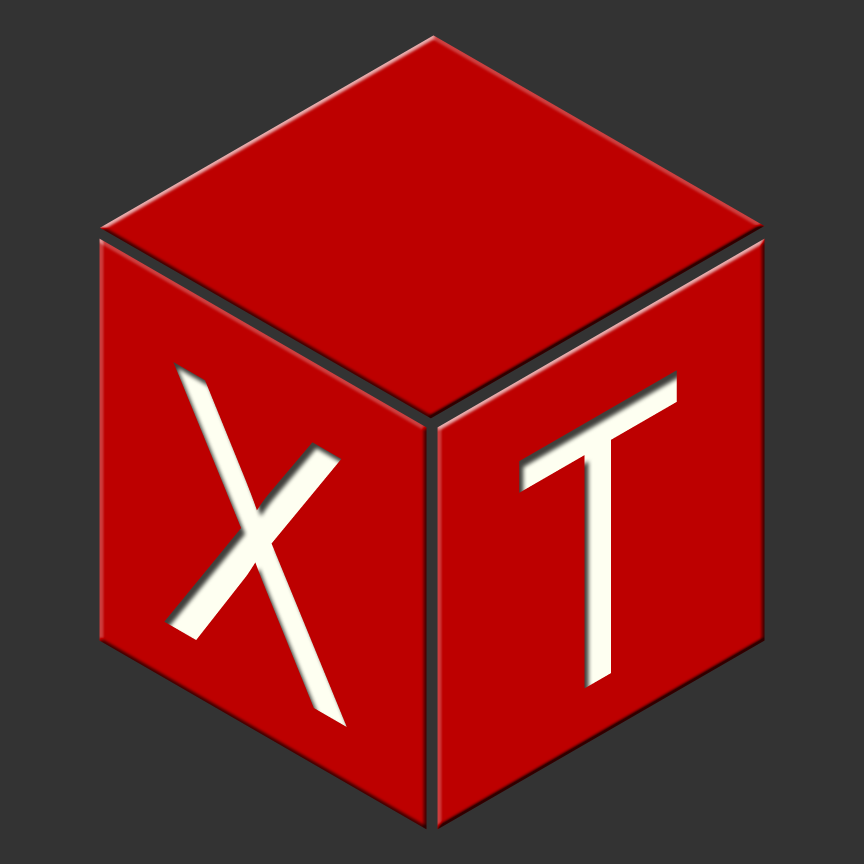
<style>
.page{position:relative;width:864px;height:864px;background:#333333}
.page>*{position:absolute;margin:0}
.t1{font:369.5px "ArialMT";letter-spacing:-0.1em;color:#fefff1;scale:0.87 1}
</style>
<div class="page">
<p class="t1" style="left:164px;top:362px;width:183px;height:365px;rotate:30deg">X</p>
<p class="t1" style="left:519px;top:370px;width:158px;height:319px;rotate:-30deg">T</p>
</div>
